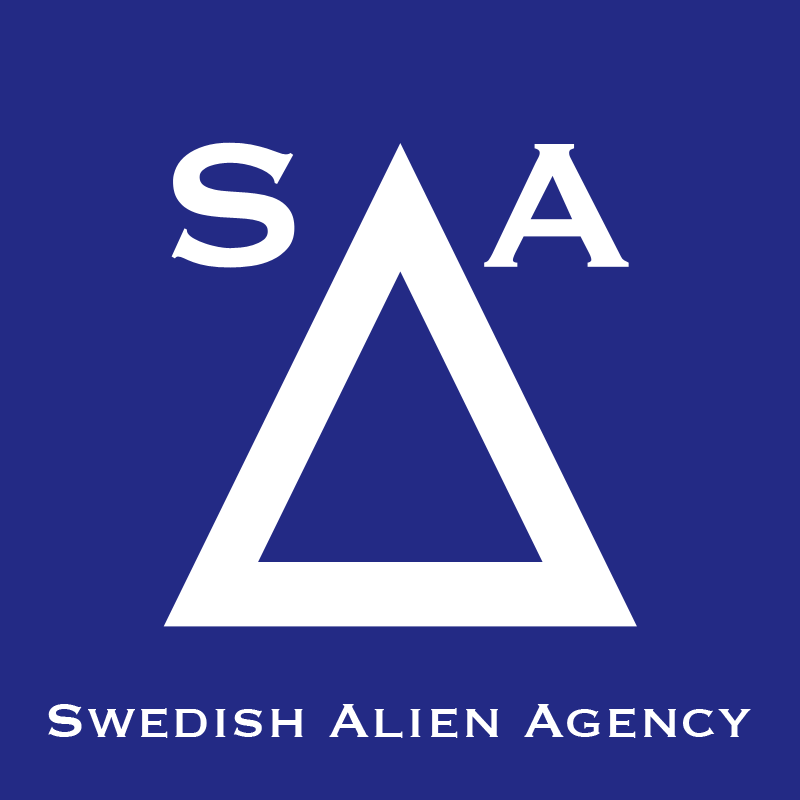
<style>
.page{position:relative;width:800px;height:800px;background:#232a85}
.page>*{position:absolute;margin:0}
.t1{font:63.3px "Copperplate";color:#ffffff}
</style>
<div class="page">
<p class="t1" style="left:48px;top:704px;width:703px;height:34px">Swedish Alien Agency</p>
</div>
